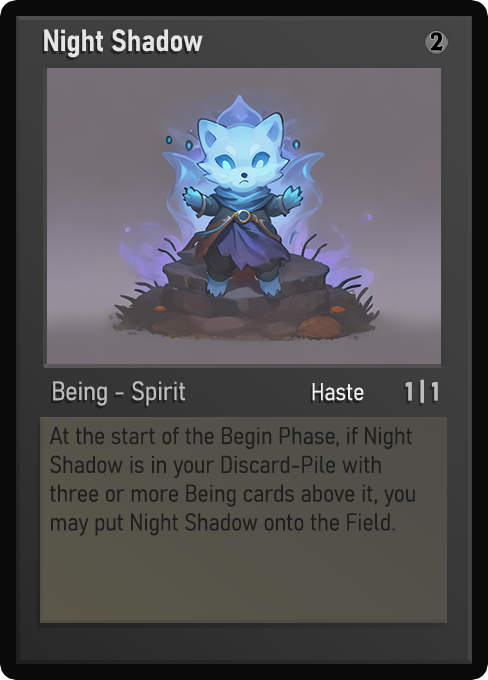
<style>
.page{position:relative;width:488px;height:680px}
.page>*{position:absolute;margin:0}
.t1{font:30px "Bahnschrift-SemiBoldSemiCondensed";color:#f2f2f2;font-weight:bold}
.t2{font:25px "WTRRoycroft";color:#000000;font-weight:bold;scale:1.09 1}
.t3{font:26px "Bahnschrift-LightSemiCondensed";color:#c8c8c8;font-weight:bold}
.t4{font:24px "Bahnschrift-LightSemiCondensed";color:#f0efef;font-weight:bold}
.t5{font:26px "Bahnschrift-BoldSemiCondensed";color:#bdbdbd;font-weight:bold}
.t6{font:24px "Bahnschrift-LightSemiCondensed";color:#1e1e1e;font-weight:bold}
</style>
<div class="page">
<p class="t1" style="left:44px;top:29px;width:159px;height:29px;opacity:0.9">Night Shadow</p>
<p class="t2" style="left:430px;top:32px;width:13px;height:19px">2</p>
<p class="t3" style="left:53px;top:381px;width:132px;height:25px;opacity:0.9">Being - Spirit</p>
<p class="t4" style="left:312px;top:383px;width:52px;height:18px">Haste</p>
<p class="t5" style="left:405px;top:379px;width:33px;height:24px">1 | 1</p>
<p class="t6" style="left:49px;top:427px;width:366px;height:109px">At the start of the Begin Phase, if Night Shadow is in your Discard-Pile with three or more Being cards above it, you may put Night Shadow onto the Field.</p>
</div>
